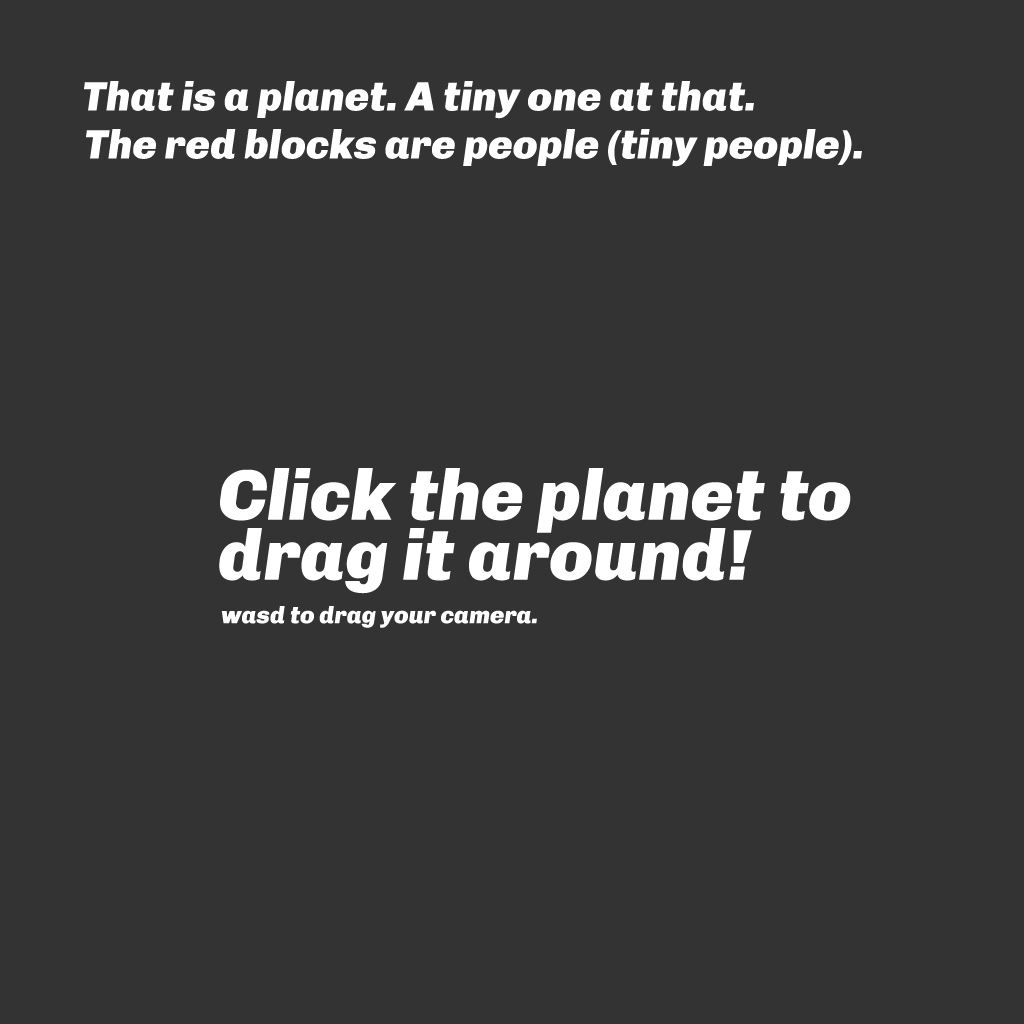
<style>
.page{position:relative;width:1024px;height:1024px;background:#333333}
.page>*{position:absolute;margin:0}
.t1{font:41px "Chivo-BlackItalic";color:#ffffff}
.t2{font:72px/60px "Chivo-BlackItalic";color:#ffffff}
.t3{font:24px "Chivo-BlackItalic";color:#ffffff}
</style>
<div class="page">
<p class="t1" style="left:84px;top:81px;width:670px;height:38px">That is a planet. A tiny one at that.</p>
<p class="t1" style="left:86px;top:129px;width:776px;height:38px">The red blocks are people (tiny people).</p>
<p class="t2" style="left:219px;top:468px;width:632px;height:126px">Click the planet to drag it around!</p>
<p class="t3" style="left:221px;top:606px;width:316px;height:22px">wasd to drag your camera.</p>
</div>
